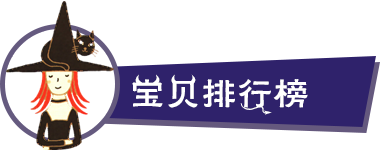
<style>
.page{position:relative;width:380px;height:150px;background:#ffffff}
.page>*{position:absolute;margin:0}
.t1{font:36px "FZHLJW--GB1-0";color:#ffffff}
</style>
<div class="page">
<p class="t1" style="left:132px;top:74px;width:176px;height:41px">宝贝排行榜</p>
</div>
